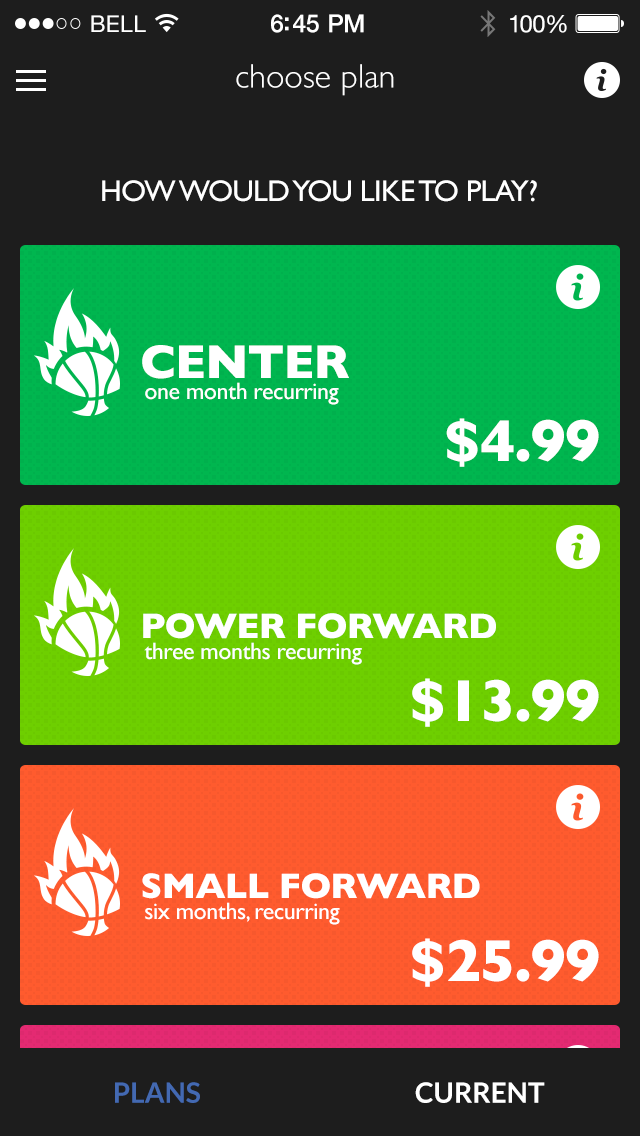
<style>
.page{position:relative;width:640px;height:1136px;background:#1d1d1d}
.page>*{position:absolute;margin:0}
.t1{font:34px "GillSans-Light";color:#ffffff}
.t2{font:30px "GillSans";letter-spacing:-0.02em;color:#ffffff;text-transform:uppercase}
.t3{font:48px "GillSans-Bold";letter-spacing:-0.02em;color:#ffffff;text-transform:uppercase}
.t4{font:24px "GillSans";letter-spacing:-0.02em;color:#ffffff}
.t5{font:60px "GillSans-Bold";letter-spacing:-0.02em;color:#ffffff}
.t6{font:36px "GillSans-Bold";letter-spacing:-0.02em;color:#ffffff;text-transform:uppercase}
.t7{font:28px "Lato-Bold";color:#4369b2}
.t8{font:28px "Lato-Bold";color:#ffffff}
</style>
<div class="page">
<p class="t1" style="left:236px;top:64px;width:158px;height:32px">choose plan</p>
<p class="t2" style="left:102px;top:180px;width:435px;height:22px">how would you like to play?</p>
<p class="t3" style="left:142px;top:345px;width:207px;height:34px">CENTER</p>
<p class="t4" style="left:145px;top:382px;width:194px;height:23px">one month recurring</p>
<p class="t5" style="left:446px;top:418px;width:153px;height:49px">$4.99</p>
<p class="t6" style="left:143px;top:613px;width:353px;height:26px">power forward</p>
<p class="t4" style="left:144px;top:642px;width:218px;height:23px">three months recurring</p>
<p class="t5" style="left:412px;top:678px;width:187px;height:49px">$13.99</p>
<p class="t6" style="left:142px;top:873px;width:338px;height:26px">Small forward</p>
<p class="t4" style="left:145px;top:902px;width:195px;height:23px">six months, recurring</p>
<p class="t5" style="left:412px;top:938px;width:187px;height:49px">$25.99</p>
<p class="t7" style="left:115px;top:1082px;width:85px;height:21px">PLANS</p>
<p class="t8" style="left:415px;top:1082px;width:130px;height:21px">CURRENT</p>
</div>
